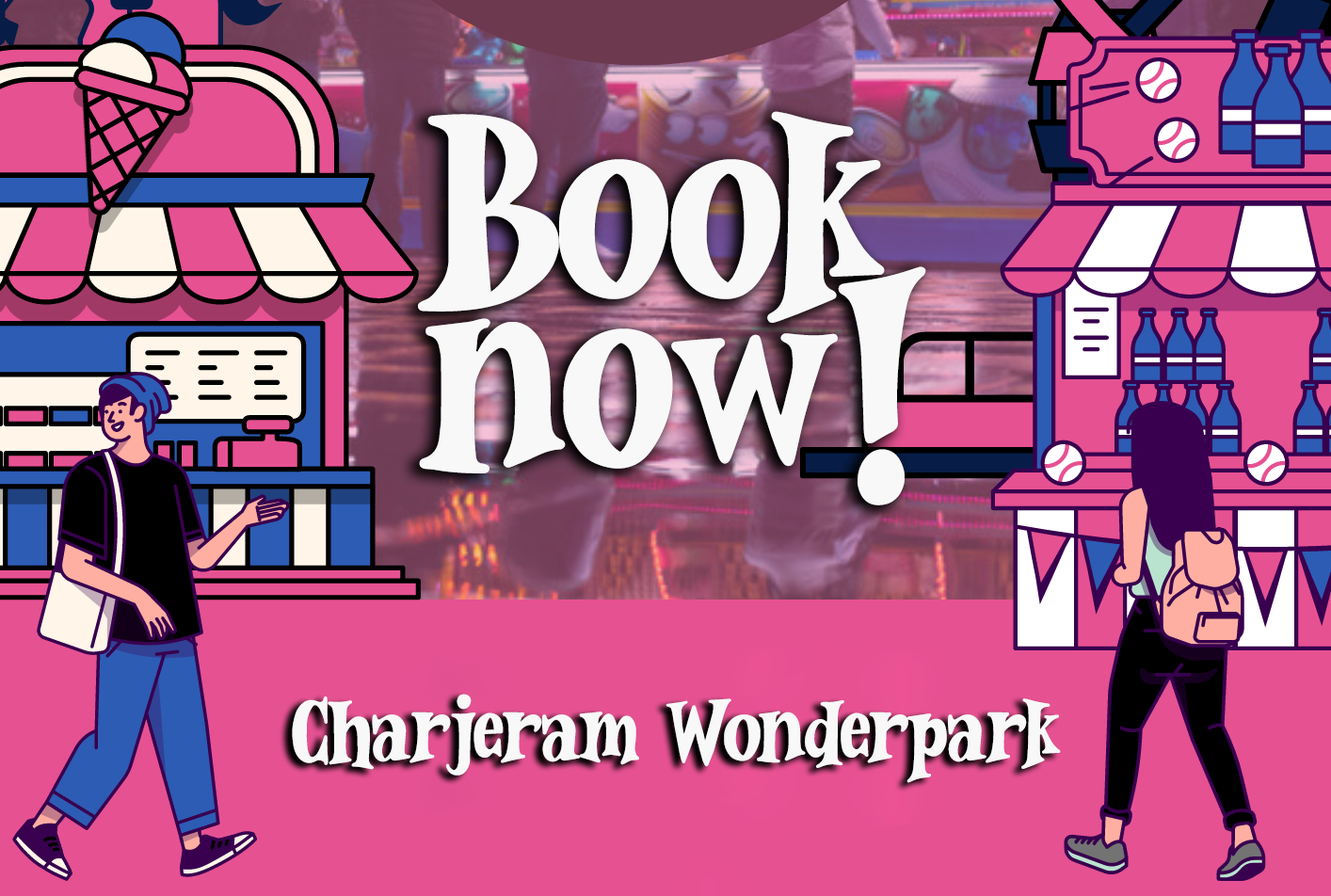
<style>
.page{position:relative;width:1331px;height:896px;background:#e65192}
.page>*{position:absolute;margin:0}
.t1{font:282.4px/169.4px "WonderMagicFreeTrial";color:#f8f8f8}
.t2{font:94.1px "WonderMagicFreeTrial";color:#f8f8f8}
</style>
<div class="page">
<p class="t1" style="left:418px;top:111px;width:508px;height:394px;text-align:justify">Book <br>now!</p>
<p class="t2" style="left:292px;top:694px;width:769px;height:89px">Charjeram Wonderpark</p>
</div>
